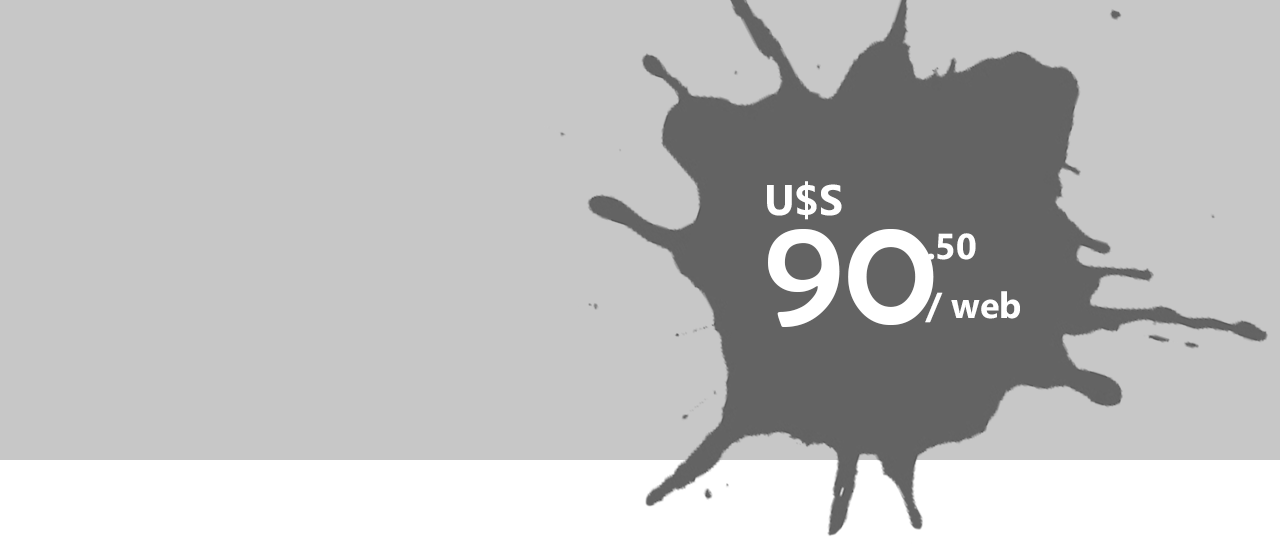
<style>
.page{position:relative;width:1280px;height:557px;background:#c7c7c7}
.page>*{position:absolute;margin:0}
.t1{font:20.5px "Ebrima-Bold";color:#ffffff}
.t2{font:75.3px "BerlinSansFB-Reg";color:#ffffff}
.t3{font:17.2px "Ebrima-Bold";color:#ffffff}
</style>
<div class="page">
<p class="t1" style="left:767px;top:181px;width:75px;height:39px">U$S</p>
<p class="t2" style="left:768px;top:229px;width:166px;height:98px">90</p>
<p class="t3" style="left:927px;top:233px;width:49px;height:27px">.50</p>
<p class="t3" style="left:925px;top:291px;width:95px;height:32px">/ web</p>
</div>
